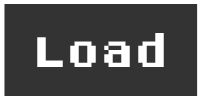
<style>
.page{position:relative;width:200px;height:100px;background:#333333}
.page>*{position:absolute;margin:0}
.t1{font:68px "8-Bit-Madness";color:#ffffff}
</style>
<div class="page">
<p class="t1" style="left:37px;top:33px;width:127px;height:34px">Load</p>
</div>
